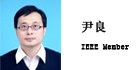
<style>
.page{position:relative;width:140px;height:70px;background:#ffffff}
.page>*{position:absolute;margin:0}
.t1{font:8.3px "SimSun";color:#090909;font-weight:bold}
.t2{font:12.5px "SimSun";color:#090909;font-weight:bold}
</style>
<div class="page">
<p class="t1" style="left:81px;top:20px;width:48px;height:30px"><span class="t2">尹良<br></span>IEEE Member</p>
</div>
